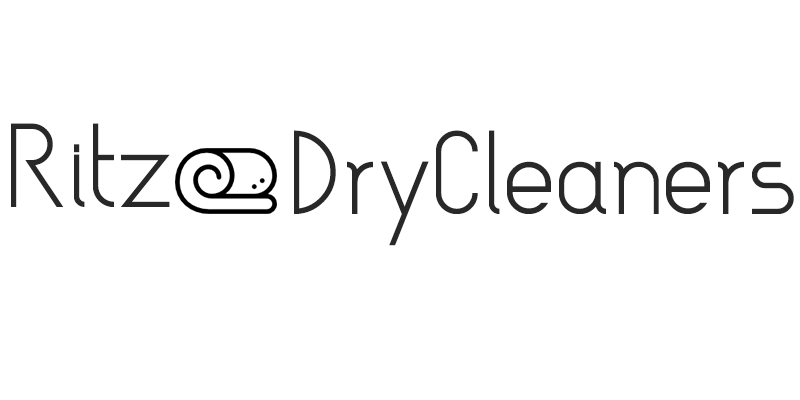
<style>
.page{position:relative;width:800px;height:400px;background:#ffffff}
.page>*{position:absolute;margin:0}
.t1{font:169px "Asgalt-Regular";color:#282828}
</style>
<div class="page">
<p class="t1" style="left:11px;top:123px;width:159px;height:84px">Ritz</p>
<p class="t1" style="left:294px;top:130px;width:500px;height:116px">DryCleaners</p>
</div>
